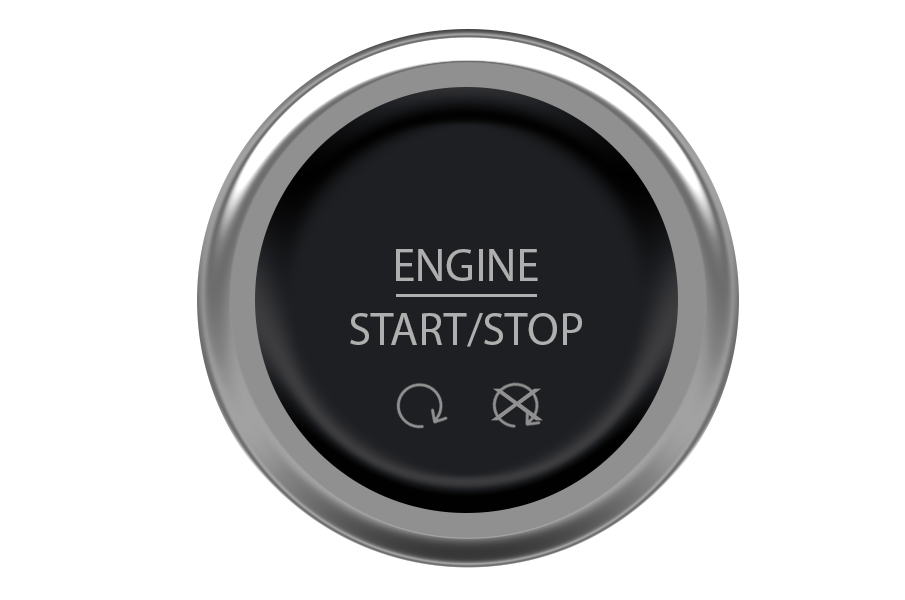
<style>
.page{position:relative;width:905px;height:600px;background:#ffffff}
.page>*{position:absolute;margin:0}
.t1{font:46.1px "MyriadPro-Regular";color:#afafaf}
.t2{font:44.5px "Avenir-Light";color:#909090;scale:1.91 1}
</style>
<div class="page">
<p class="t1" style="left:396px;top:249px;width:142px;height:32px">ENGINE</p>
<p class="t1" style="left:350px;top:313px;width:232px;height:34px">START/STOP</p>
<p class="t2" style="left:491px;top:388px;width:52px;height:33px">X</p>
</div>
